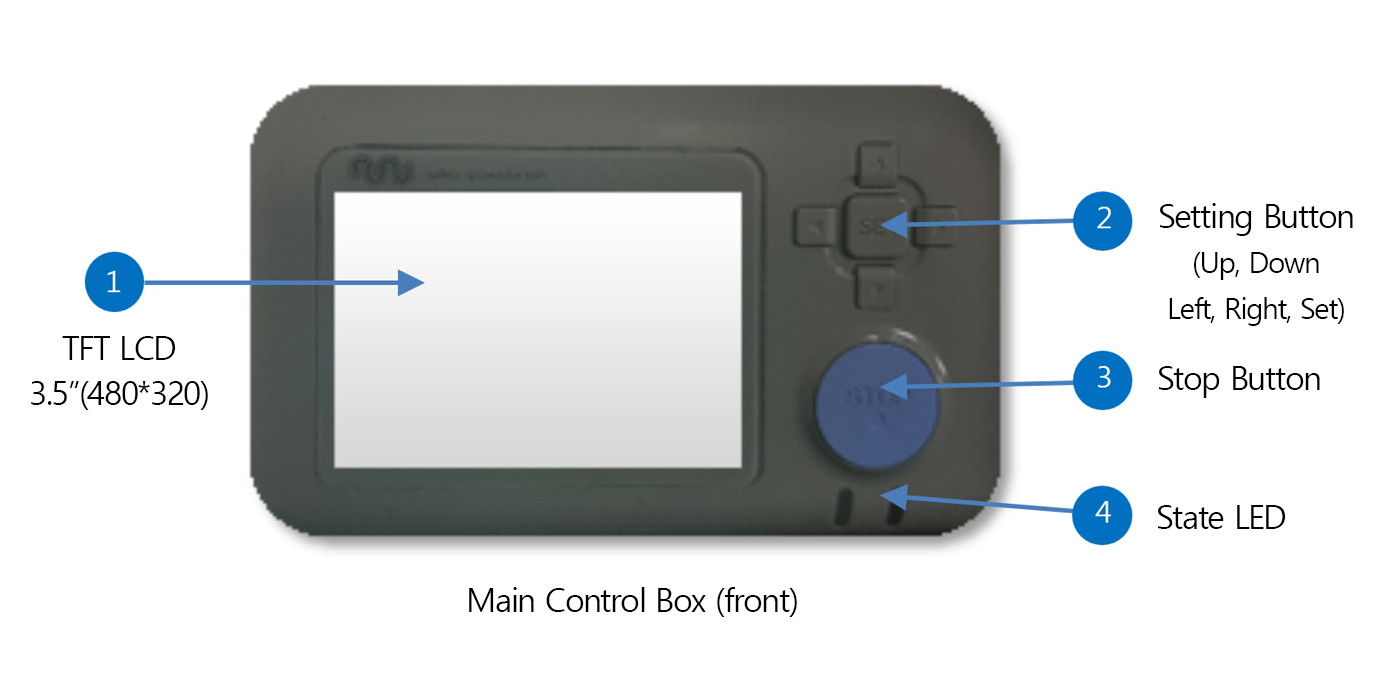
<style>
.page{position:relative;width:1400px;height:700px;background:#ffffff}
.page>*{position:absolute;margin:0}
.t1{font:29.2px/45.8px "MalgunGothic";letter-spacing:-0.05em;color:#000000}
.t2{font:33.3px/45.8px "MalgunGothic";letter-spacing:-0.05em;color:#000000}
.t3{font:33.3px "MalgunGothic";letter-spacing:-0.05em;color:#000000}
</style>
<div class="page">
<p class="t1" style="left:1160px;top:203px;width:193px;height:123px;text-align:center"><span class="t2">Setting Button<br></span>(Up, Down<br>Left, Right, Set)</p>
<p class="t2" style="left:31px;top:336px;width:177px;height:74px;text-align:center">TFT LCD<br>3.5”(480*320)</p>
<p class="t3" style="left:1159px;top:366px;width:161px;height:32px">Stop Button</p>
<p class="t3" style="left:1158px;top:505px;width:128px;height:24px">State LED</p>
<p class="t3" style="left:469px;top:587px;width:328px;height:30px">Main Control Box (front)</p>
</div>
